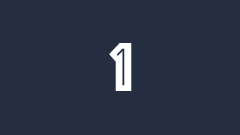
<style>
.page{position:relative;width:240px;height:135px;background:#252e41}
.page>*{position:absolute;margin:0}
.t1{font:72px "Phosphate-Inline";color:#ffffff}
</style>
<div class="page">
<p class="t1" style="left:109px;top:43px;width:23px;height:48px">1</p>
</div>
